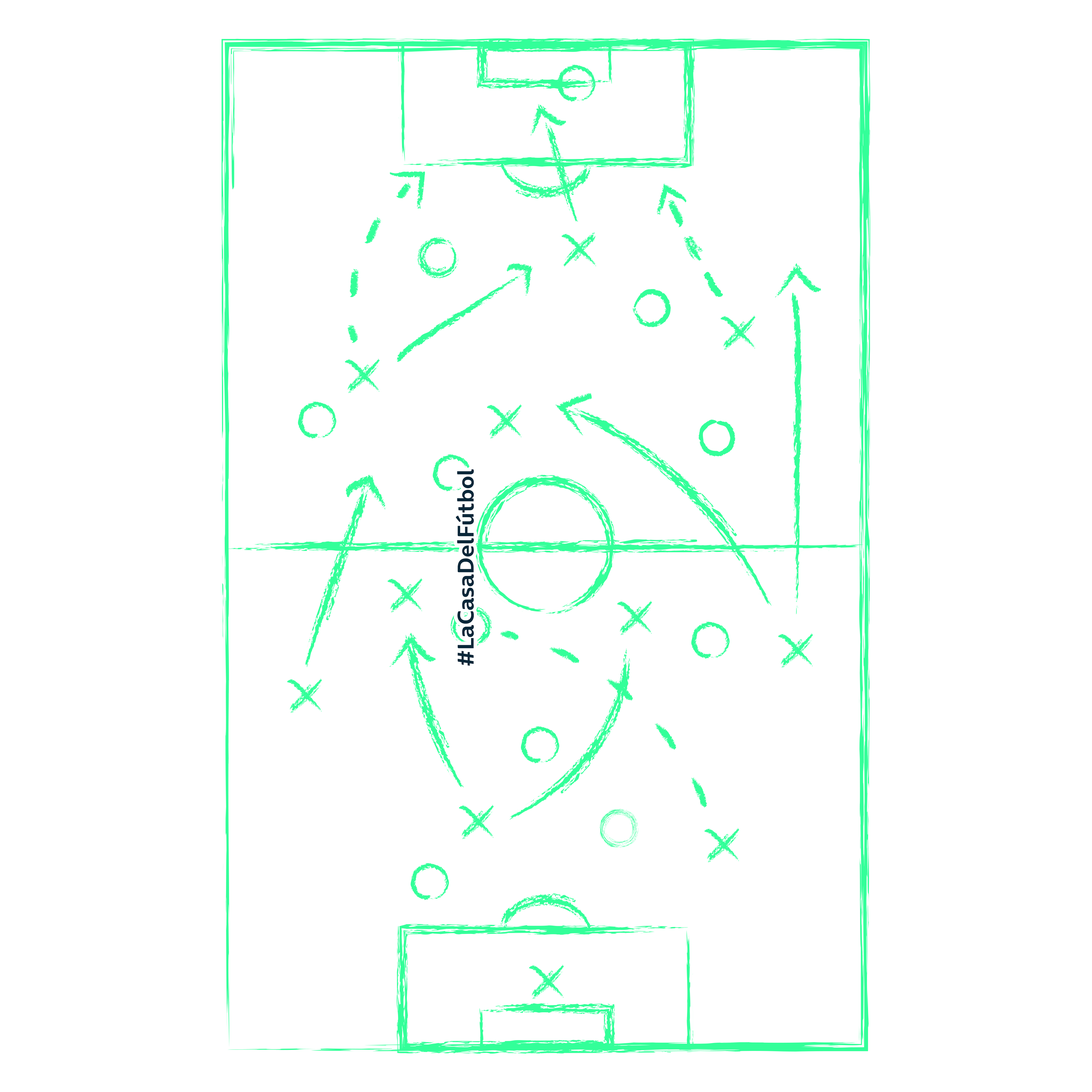
<style>
.page{position:relative;width:1092px;height:1092px;background:#ffffff}
.page>*{position:absolute;margin:0}
.t1{font:23.2px "OnAir-Bold";color:#0a2739}
</style>
<div class="page">
<p class="t1" style="left:456px;top:469px;width:18px;height:197px;rotate:-90deg">#LaCasaDelFútbol</p>
</div>
